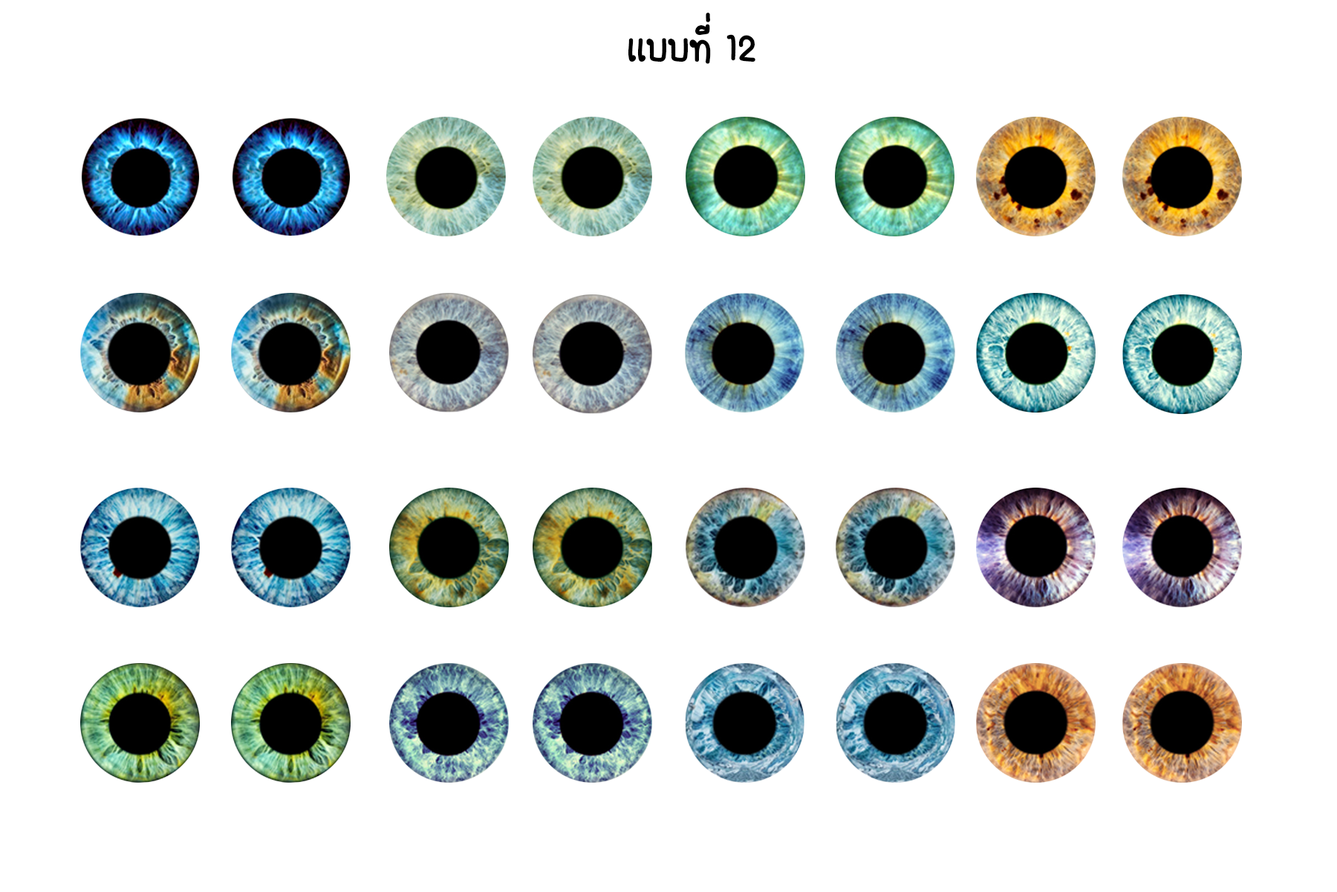
<style>
.page{position:relative;width:1337px;height:892px;background:#ffffff}
.page>*{position:absolute;margin:0}
.t1{font:55.7px "FCDaisyRegular";color:#000000}
</style>
<div class="page">
<p class="t1" style="left:628px;top:13px;width:128px;height:51px">เเบบที่ 12</p>
</div>
